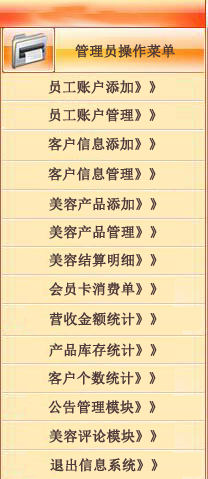
<style>
.page{position:relative;width:208px;height:479px;background:#ffeab8}
.page>*{position:absolute;margin:0}
.t1{font:14px "NSimSun";color:#4d3939;font-weight:bold}
</style>
<div class="page">
<p class="t1" style="left:75px;top:44px;width:100px;height:14px">管理员操作菜单</p>
<p class="t1" style="left:48px;top:80px;width:108px;height:14px">员工账户添加》》</p>
<p class="t1" style="left:48px;top:108px;width:108px;height:14px">员工账户管理》》</p>
<p class="t1" style="left:48px;top:137px;width:108px;height:14px">客户信息添加》》</p>
<p class="t1" style="left:48px;top:167px;width:108px;height:14px">客户信息管理》》</p>
<p class="t1" style="left:49px;top:197px;width:108px;height:14px">美容产品添加》》</p>
<p class="t1" style="left:49px;top:225px;width:108px;height:14px">美容产品管理》》</p>
<p class="t1" style="left:49px;top:253px;width:108px;height:14px">美容结算明细》》</p>
<p class="t1" style="left:49px;top:282px;width:108px;height:14px">会员卡消费单》》</p>
<p class="t1" style="left:49px;top:312px;width:108px;height:14px">营收金额统计》》</p>
<p class="t1" style="left:49px;top:343px;width:108px;height:14px">产品库存统计》》</p>
<p class="t1" style="left:48px;top:371px;width:108px;height:14px">客户个数统计》》</p>
<p class="t1" style="left:48px;top:400px;width:108px;height:14px">公告管理模块》》</p>
<p class="t1" style="left:49px;top:429px;width:108px;height:14px">美容评论模块》》</p>
<p class="t1" style="left:50px;top:458px;width:108px;height:14px">退出信息系统》》</p>
</div>
